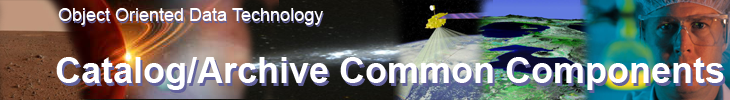
<style>
.page{position:relative;width:730px;height:100px}
.page>*{position:absolute;margin:0}
.t1{font:18px "ArialMT";color:#ffffff}
.t2{font:18px "ArialMT"}
.t3{font:36px "Arial-BoldMT";color:#ffffff}
.t4{font:36px "Arial-BoldMT"}
</style>
<div class="page">
<p class="t1" style="left:58px;top:8px;width:265px;height:17px">Object Oriented Data Technology</p>
<p class="t2" style="left:60px;top:9px;width:264px;height:18px">Object Oriented Data Technology</p>
<p class="t3" style="left:56px;top:57px;width:668px;height:33px">Catalog/Archive Common Components</p>
<p class="t4" style="left:58px;top:60px;width:668px;height:33px">Catalog/Archive Common Components</p>
</div>
